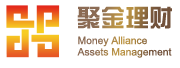
<style>
.page{position:relative;width:180px;height:68px;background:#ffffff}
.page>*{position:absolute;margin:0}
.t1{font:24.3px "DFZongYi-Bd-80-Win-GB"}
.t2{font:10.3px/11.4px "ArialMT"}
</style>
<div class="page">
<p class="t1" style="left:77px;top:6px;width:95px;height:23px">聚金理财</p>
<p class="t2" style="left:77px;top:36px;width:95px;height:22px">Money Alliance <br>Assets Management</p>
</div>
